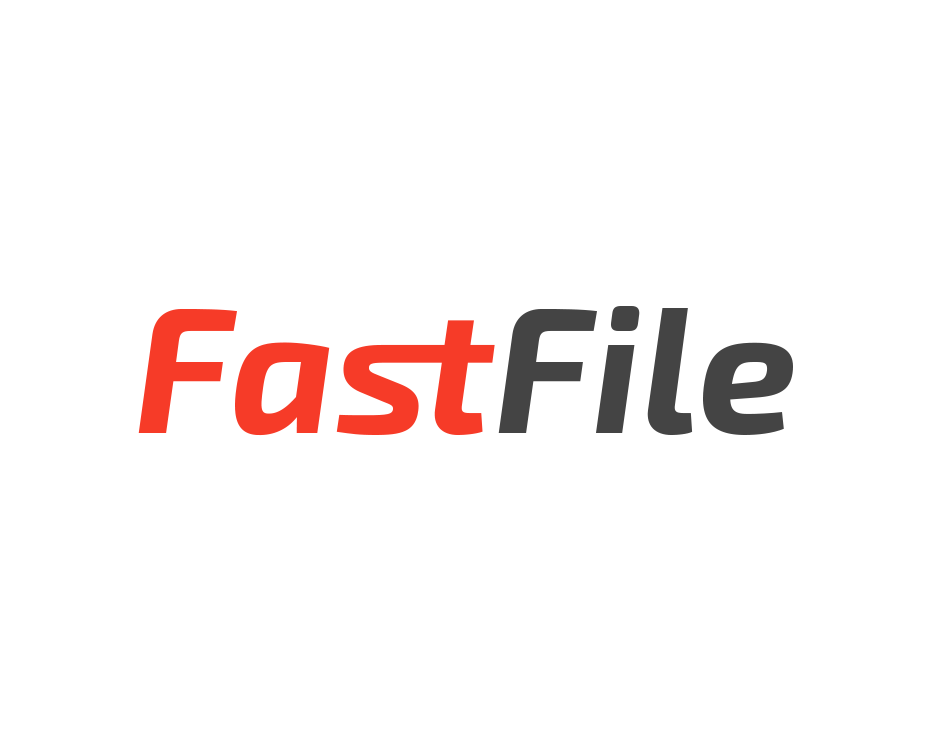
<style>
.page{position:relative;width:949px;height:741px;background:#ffffff}
.page>*{position:absolute;margin:0}
.t1{font:178.2px "Exo2.0-BoldItalic";color:#f63b28}
.t2{font:178.2px "Exo2.0-BoldItalic";color:#444444}
</style>
<div class="page">
<p class="t1" style="left:138px;top:306px;width:655px;height:130px">Fast<span class="t2">File</span></p>
</div>
